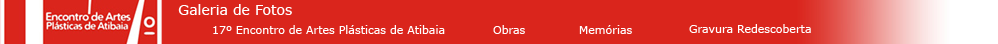
<style>
.page{position:relative;width:998px;height:44px;background:#da251c}
.page>*{position:absolute;margin:0}
.t1{font:14px "MSReferenceSansSerif";color:#ffffff}
.t2{font:11px "MSReferenceSansSerif";color:#ffffff}
</style>
<div class="page">
<p class="t1" style="left:178px;top:4px;width:114px;height:11px">Galeria de Fotos</p>
<p class="t2" style="left:213px;top:25px;width:232px;height:9px">17º Encontro de Artes Plásticas de Atibaia</p>
<p class="t2" style="left:493px;top:25px;width:32px;height:9px">Obras</p>
<p class="t2" style="left:579px;top:25px;width:53px;height:9px">Memórias</p>
<p class="t2" style="left:689px;top:24px;width:122px;height:9px">Gravura Redescoberta</p>
</div>
